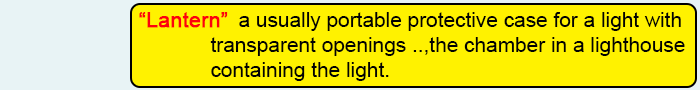
<style>
.page{position:relative;width:700px;height:90px;background:#fff200}
.page>*{position:absolute;margin:0}
.t1{font:20.8px "ArialMT";color:#020202}
.t2{font:20.8px "ArialMT";color:#fd010d;font-weight:bold}
</style>
<div class="page">
<p class="t1" style="left:139px;top:12px;width:546px;height:69px"><span class="t2">“Lantern”  </span>a usually portable protective case for a light with<br>   transparent openings ..,the chamber in a lighthouse <br>  containing the light.</p>
</div>
